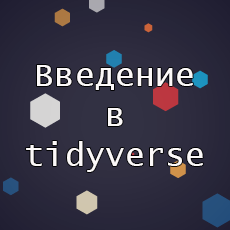
<style>
.page{position:relative;width:230px;height:230px}
.page>*{position:absolute;margin:0}
.t1{font:33.3px "LucidaConsole";color:#fcf9f9}
</style>
<div class="page">
<p class="t1" style="left:26px;top:65px;width:177px;height:107px;text-align:center">Введение<br>в<br>tidyverse</p>
</div>
